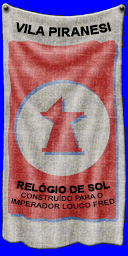
<style>
.page{position:relative;width:128px;height:256px}
.page>*{position:absolute;margin:0}
.t1{font:12px "Arial-BoldMT";color:#000000;text-transform:uppercase;scale:1.06 1}
.t2{font:9.8px "Arial-BoldMT";color:#000000;text-transform:uppercase;scale:1.06 1}
.t3{font:6.6px "ArialMT";color:#000000;text-transform:uppercase;scale:1.14 1}
</style>
<div class="page">
<p class="t1" style="left:16px;top:22px;width:96px;height:15px">vila piranesi</p>
<p class="t2" style="left:16px;top:180px;width:94px;height:14px">relógio de sol</p>
<p class="t3" style="left:11px;top:192px;width:104px;height:17px;text-align:center">construído para o <br>imperador louco Fred</p>
</div>
